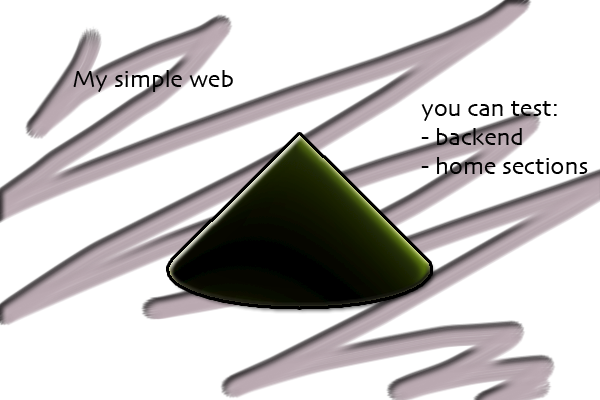
<style>
.page{position:relative;width:600px;height:400px;background:#ffffff}
.page>*{position:absolute;margin:0}
.t1{font:24px "Skia-Regular";color:#000000}
</style>
<div class="page">
<p class="t1" style="left:73px;top:70px;width:160px;height:22px">My simple web</p>
<p class="t1" style="left:421px;top:101px;width:167px;height:73px">you can test:<br>- backend<br>- home sections</p>
</div>
